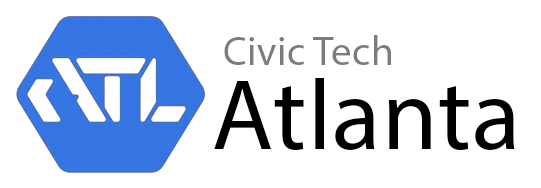
<style>
.page{position:relative;width:541px;height:188px;background:#ffffff}
.page>*{position:absolute;margin:0}
.t1{font:41.2px "MyriadPro-Regular";letter-spacing:0.01em;color:#7d7c7c}
.t2{font:100.4px "MyriadPro-Regular";letter-spacing:0.01em;color:#000000}
</style>
<div class="page">
<p class="t1" style="left:224px;top:35px;width:167px;height:30px">Civic Tech</p>
<p class="t2" style="left:214px;top:78px;width:301px;height:72px">Atlanta</p>
</div>
